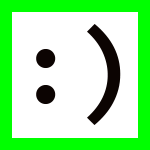
<style>
.page{position:relative;width:150px;height:150px;background:#ffffff}
.page>*{position:absolute;margin:0}
.t1{font:108px "Consolas-Bold";color:#0c0402}
</style>
<div class="page">
<p class="t1" style="left:36px;top:24px;width:85px;height:101px">:)</p>
</div>
